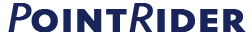
<style>
.page{position:relative;width:252px;height:32px;background:#ffffff}
.page>*{position:absolute;margin:0}
.t1{font:44.1px "Seravek-Medium";color:#19245a;font-variant:small-caps;font-weight:bold}
.t2{font:44.1px "Seravek-Italic";color:#19245a;text-transform:uppercase;font-weight:bold}
</style>
<div class="page">
<p class="t1" style="left:8px;top:3px;width:238px;height:30px"><span class="t2">P</span>oint<span class="t2">R</span>ider</p>
</div>
